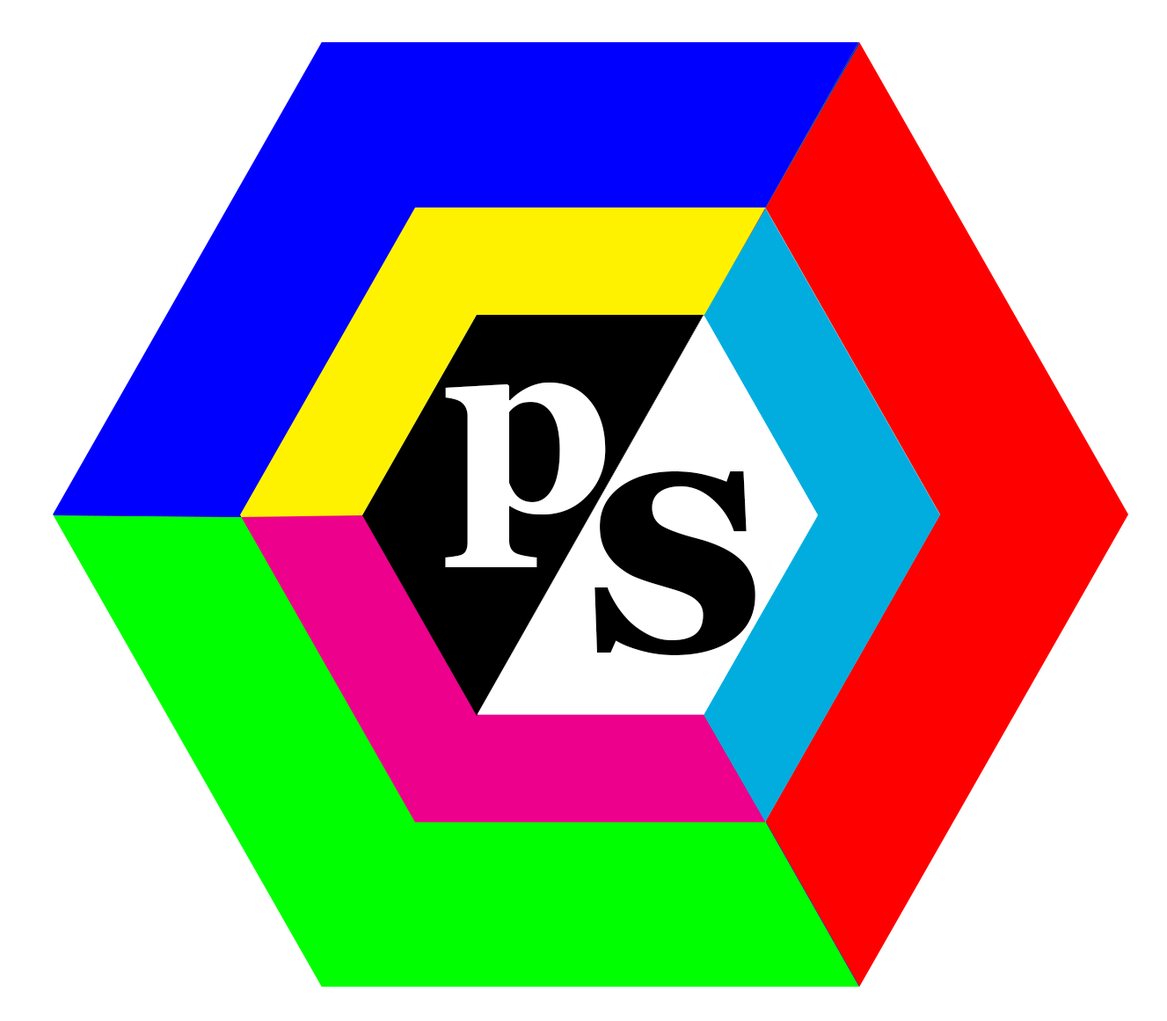
<style>
.page{position:relative;width:1167px;height:1021px;background:#ffffff}
.page>*{position:absolute;margin:0}
.t1{font:258.8px "Georgia-Bold";color:#ffffff}
.t2{font:358.1px "Georgia-Bold";color:#000000}
</style>
<div class="page">
<p class="t1" style="left:445px;top:383px;width:161px;height:184px">p</p>
<p class="t2" style="left:595px;top:472px;width:161px;height:183px">s</p>
</div>
